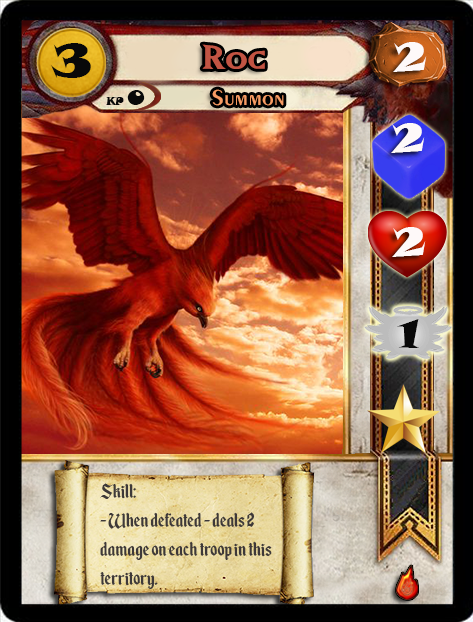
<style>
.page{position:relative;width:473px;height:622px}
.page>*{position:absolute;margin:0}
.t1{font:46.6px "SnapITC-Regular";color:#090909;scale:1.05 1}
.t2{font:40px "MatrixBoldSmallCaps";color:#c25443;scale:1.06 1}
.t3{font:40px "SnapITC-Regular";color:#fef9f9;scale:1.05 1}
.t4{font:22.7px "Exotic350BT-DemiBold";color:#f89c64;scale:1.06 1}
.t5{font:20.5px "SnapITC-Regular";color:#090909}
.t6{font:40px "SnapITC-Regular";color:#090909;scale:1.05 1}
.t7{font:24px "EnchantedLand";color:#3e3939}
</style>
<div class="page">
<p class="t1" style="left:51px;top:43px;width:40px;height:35px">3</p>
<p class="t2" style="left:202px;top:44px;width:63px;height:25px">Roc</p>
<p class="t3" style="left:393px;top:42px;width:34px;height:30px">2</p>
<p class="t4" style="left:212px;top:89px;width:72px;height:17px">Summon</p>
<p class="t5" style="left:127px;top:90px;width:18px;height:15px">0</p>
<p class="t3" style="left:391px;top:123px;width:34px;height:30px">2</p>
<p class="t3" style="left:392px;top:227px;width:34px;height:30px">2</p>
<p class="t6" style="left:397px;top:319px;width:22px;height:29px">1</p>
<p class="t7" style="left:100px;top:483px;width:172px;height:106px">Skill:<br>- When defeated - deals 2 damage on each troop in this territory.</p>
</div>
